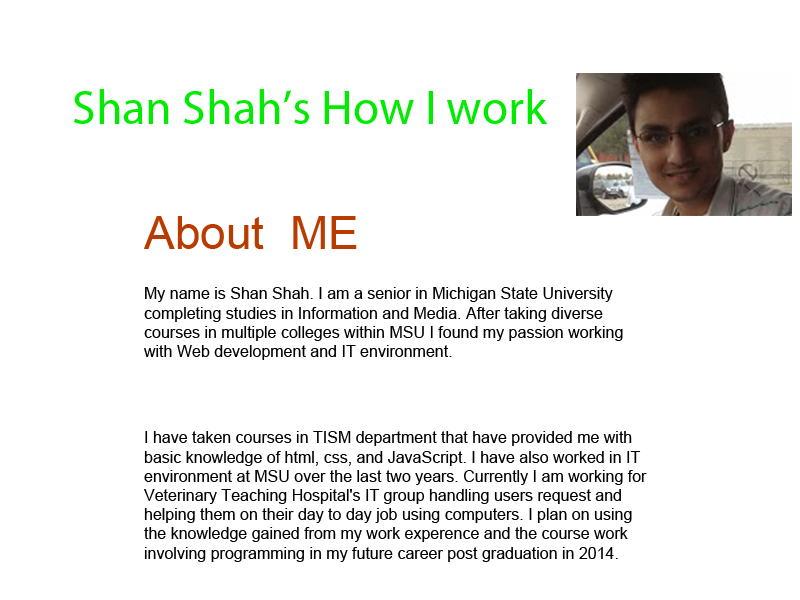
<style>
.page{position:relative;width:800px;height:600px;background:#ffffff}
.page>*{position:absolute;margin:0}
.t1{font:48px "MyriadPro-Regular";color:#00eb00}
.t2{font:46px "ArialMT";color:#b93b00}
.t3{font:16px "ArialMT";color:#000000}
</style>
<div class="page">
<p class="t1" style="left:74px;top:89px;width:474px;height:35px">Shan Shah’s How I work</p>
<p class="t2" style="left:143px;top:216px;width:214px;height:33px">About  ME</p>
<p class="t3" style="left:144px;top:287px;width:479px;height:73px">My name is Shan Shah. I am a senior in Michigan State University completing studies in Information and Media. After taking diverse courses in multiple colleges within MSU I found my passion working with Web development and IT environment.</p>
<p class="t3" style="left:144px;top:431px;width:503px;height:131px">I have taken courses in TISM department that have provided me with basic knowledge of html, css, and JavaScript. I have also worked in IT environment at MSU over the last two years. Currently I am working for Veterinary Teaching Hospital's IT group handling users request and helping them on their day to day job using computers. I plan on using the knowledge gained from my work experence and the course work involving programming in my future career post graduation in 2014.</p>
</div>
